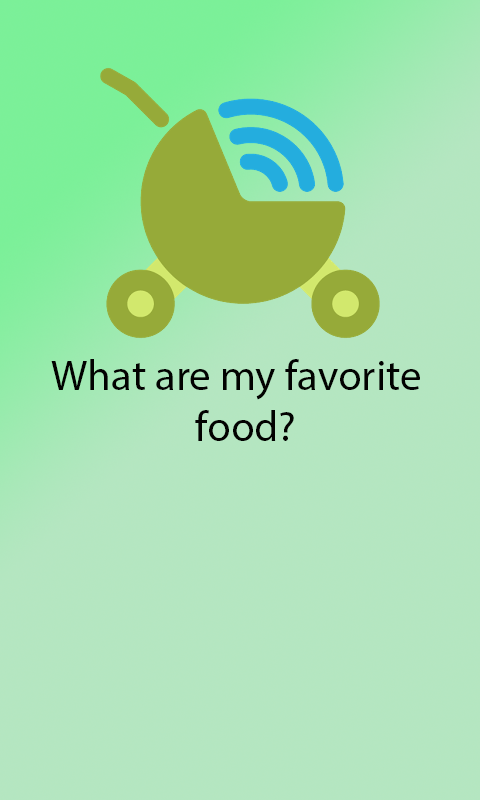
<style>
.page{position:relative;width:480px;height:800px;background:#b4e6c1}
.page>*{position:absolute;margin:0}
.t1{font:43px "MyriadPro-Regular";color:#020201}
</style>
<div class="page">
<p class="t1" style="left:51px;top:359px;width:369px;height:82px">What are my favorite <br>    food?</p>
</div>
